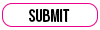
<style>
.page{position:relative;width:100px;height:30px;background:#ffffff}
.page>*{position:absolute;margin:0}
.t1{font:18px "BebasNeue";color:#000000}
</style>
<div class="page">
<p class="t1" style="left:29px;top:9px;width:41px;height:13px">Submit</p>
</div>
